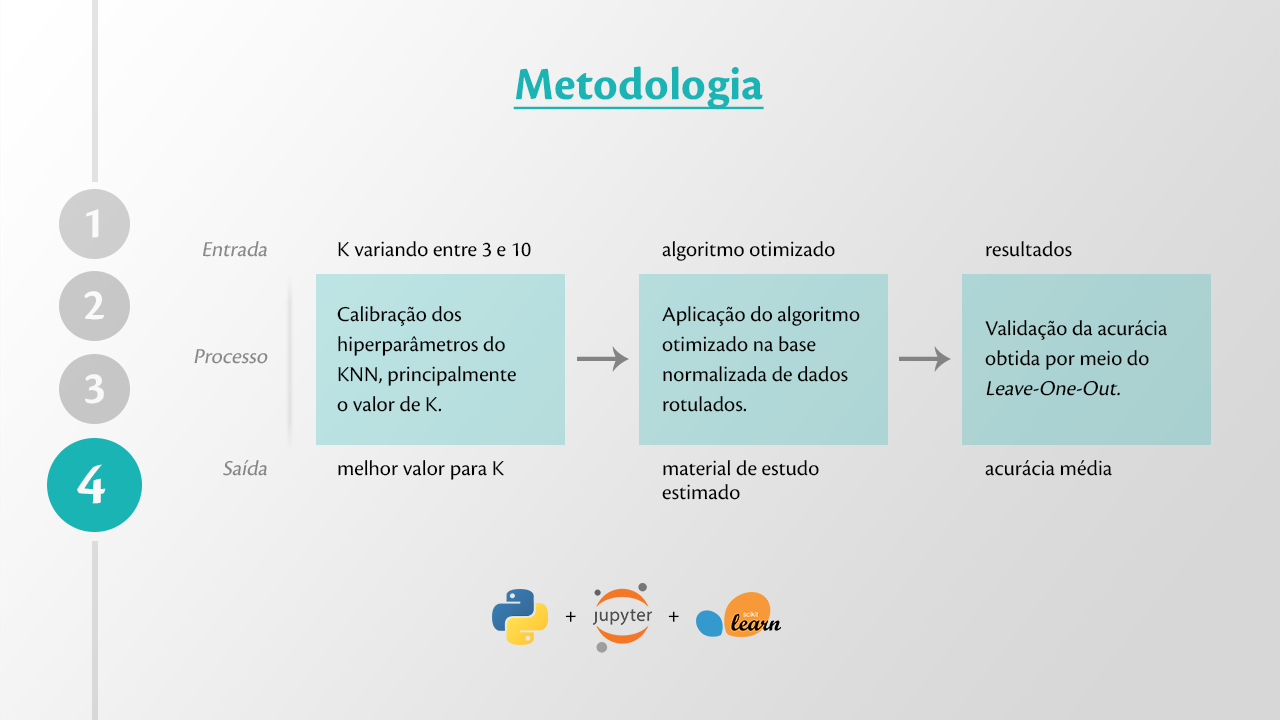
<style>
.page{position:relative;width:1280px;height:720px}
.page>*{position:absolute;margin:0}
.t1{font:48px "CronosPro-Bold";color:#1ab4b4;text-decoration:underline}
.t2{font:46px "CronosPro-Semibold";color:#f8f8f8}
.t3{font:22px "CronosPro-Regular";color:#888888;font-style:italic}
.t4{font:22px "CronosPro-Regular";color:#000000}
.t5{font:22px/30px "CronosPro-Regular";color:#000000}
.t6{font:22px/30px "CronosPro-Regular";color:#000000;font-style:italic}
.t7{font:22px "CronosPro-Regular";color:#878787;font-style:italic}
.t8{font:22px "CronosPro-Regular";color:#858585;font-style:italic}
.t9{font:22px/24px "CronosPro-Regular";color:#000000}
.t10{font:61.6px "CronosPro-Semibold";color:#f8f8f8}
</style>
<div class="page">
<p class="t1" style="left:513px;top:66px;width:251px;height:44px">Metodologia</p>
<p class="t2" style="left:85px;top:209px;width:14px;height:29px">1</p>
<p class="t3" style="left:203px;top:241px;width:64px;height:16px">Entrada</p>
<p class="t4" style="left:338px;top:241px;width:193px;height:16px">K variando entre 3 e 10</p>
<p class="t4" style="left:662px;top:241px;width:173px;height:20px">algoritmo otimizado</p>
<p class="t4" style="left:986px;top:241px;width:86px;height:16px">resultados</p>
<p class="t2" style="left:84px;top:291px;width:20px;height:29px">2</p>
<p class="t2" style="left:84px;top:291px;width:20px;height:29px">2</p>
<p class="t5" style="left:337px;top:306px;width:179px;height:106px">Calibração dos hiperparâmetros do <br>KNN, principalmente <br>o valor de K.</p>
<p class="t5" style="left:662px;top:306px;width:198px;height:106px">Aplicação do algoritmo otimizado na base <br>normalizada de dados <br>rotulados.</p>
<p class="t5" style="left:985px;top:320px;width:182px;height:76px">Validação da acurácia <br>obtida por meio do <span class="t6">Leave-One-Out.</span></p>
<p class="t7" style="left:194px;top:349px;width:74px;height:15px">Processo</p>
<p class="t2" style="left:85px;top:374px;width:19px;height:30px">3</p>
<p class="t8" style="left:223px;top:460px;width:44px;height:16px">Saída</p>
<p class="t4" style="left:338px;top:460px;width:166px;height:20px">melhor valor para K</p>
<p class="t9" style="left:662px;top:460px;width:157px;height:40px">material de estudo <br>estimado</p>
<p class="t4" style="left:985px;top:460px;width:127px;height:16px">acurácia média</p>
<p class="t10" style="left:77px;top:464px;width:29px;height:40px">4</p>
<p class="t4" style="left:565px;top:611px;width:11px;height:11px">+</p>
<p class="t4" style="left:668px;top:611px;width:11px;height:11px">+</p>
</div>
